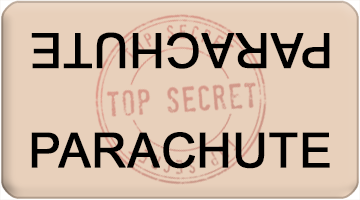
<style>
.page{position:relative;width:360px;height:200px;background:#e8d0bb}
.page>*{position:absolute;margin:0}
.t1{font:48px "ArialMT";color:#000000;font-weight:bold}
</style>
<div class="page">
<p class="t1" style="left:31px;top:32px;width:299px;height:37px;rotate:180deg">PARACHUTE</p>
<p class="t1" style="left:31px;top:132px;width:299px;height:37px">PARACHUTE</p>
</div>
